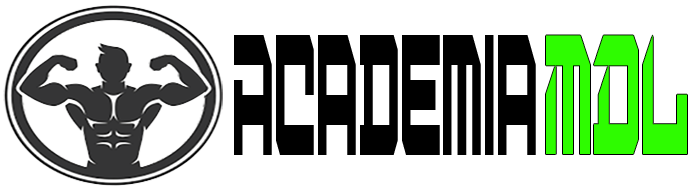
<style>
.page{position:relative;width:700px;height:190px;background:#ffffff}
.page>*{position:absolute;margin:0}
.t1{font:120px "Digital-Desolation";color:#000000;scale:0.28 1}
.t2{font:118.6px "Digital-Desolation";color:#2efc00;scale:0.33 1}
</style>
<div class="page">
<p class="t1" style="left:234px;top:35px;width:302px;height:120px">Academia</p>
<p class="t2" style="left:546px;top:35px;width:141px;height:119px">MDL</p>
</div>
